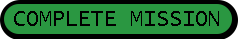
<style>
.page{position:relative;width:238px;height:39px;background:#2a9741}
.page>*{position:absolute;margin:0}
.t1{font:21px "LucidaSans-Typewriter";color:#000000}
</style>
<div class="page">
<p class="t1" style="left:14px;top:11px;width:205px;height:15px">COMPLETE MISSION</p>
</div>
